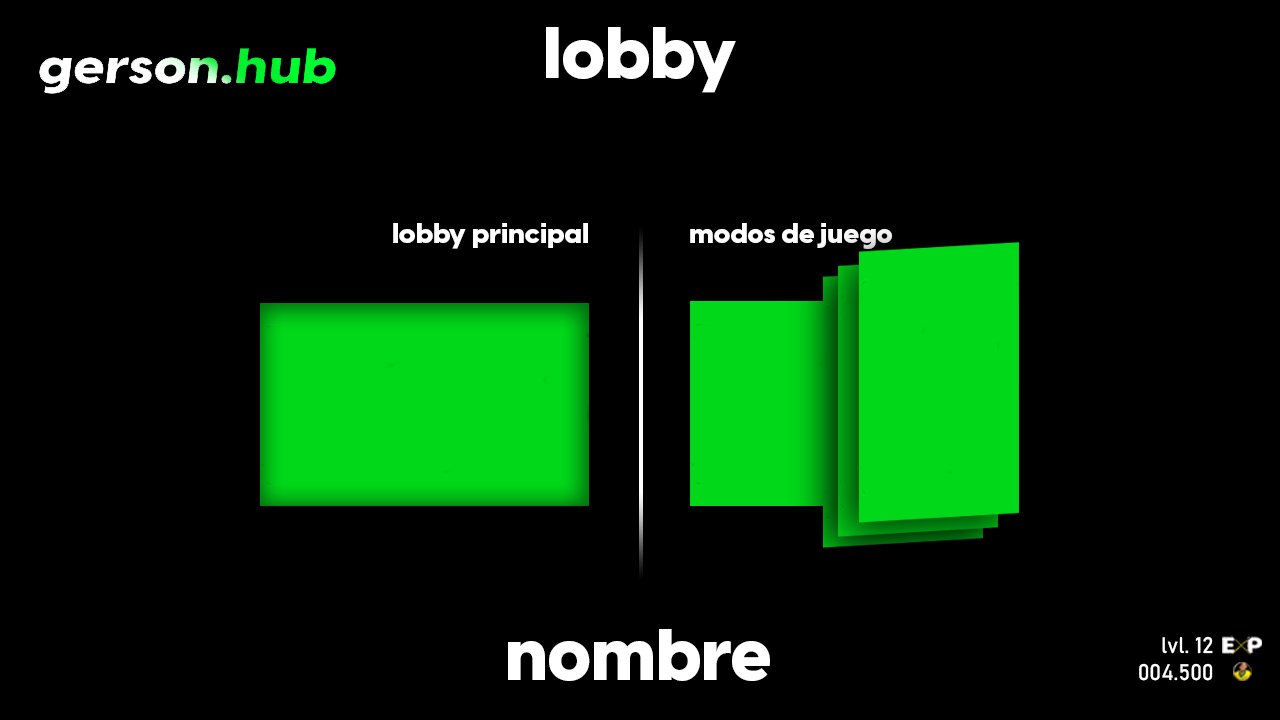
<style>
.page{position:relative;width:1280px;height:720px;background:#000000}
.page>*{position:absolute;margin:0}
.t1{font:72px "FONTSPRINGDEMO-VisbyCFHeavyRegular";color:#ffffff}
.t2{font:27.3px "FONTSPRINGDEMO-VisbyCFHeavyRegular";color:#ffffff}
.t3{font:72.4px "FONTSPRINGDEMO-VisbyCFHeavyRegular";color:#ffffff}
.t4{font:22.1px "Bahnschrift";color:#ffffff}
</style>
<div class="page">
<p class="t1" style="left:546px;top:27px;width:190px;height:66px">lobby</p>
<p class="t2" style="left:393px;top:223px;width:195px;height:26px">lobby principal</p>
<p class="t2" style="left:690px;top:223px;width:202px;height:26px">modos de juego</p>
<p class="t3" style="left:508px;top:629px;width:262px;height:52px">nombre</p>
<p class="t4" style="left:1162px;top:636px;width:51px;height:18px">lvl. 12</p>
<p class="t4" style="left:1139px;top:663px;width:74px;height:18px">004.500</p>
</div>
